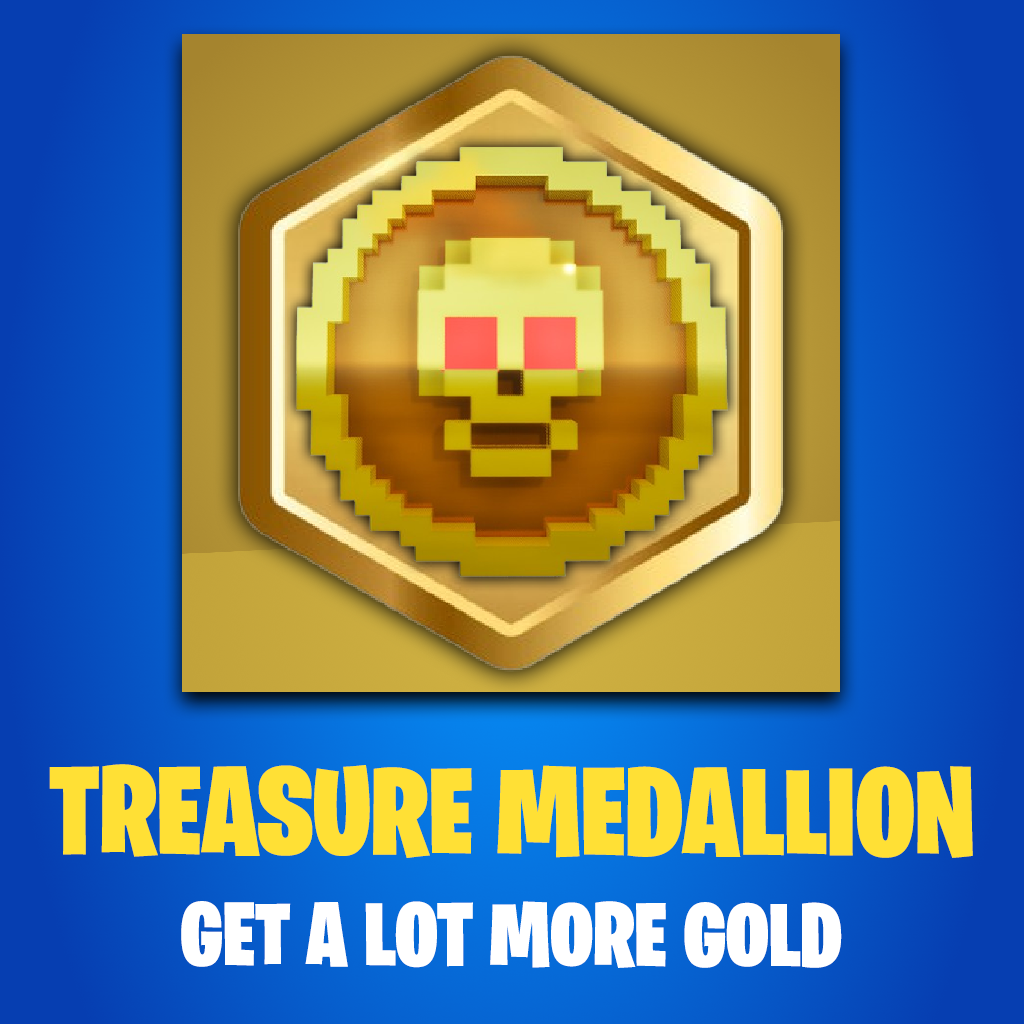
<style>
.page{position:relative;width:1024px;height:1024px}
.page>*{position:absolute;margin:0}
.t1{font:124.7px "BurbankBigCondensed-Black";color:#ffe035}
.t2{font:90px "BurbankBigCondensed-Black";color:#ffffff}
</style>
<div class="page">
<p class="t1" style="left:49px;top:764px;width:924px;height:94px">TREASURE MEDALLION</p>
<p class="t2" style="left:181px;top:901px;width:661px;height:67px">GET A LOT MORE GOLD</p>
</div>
